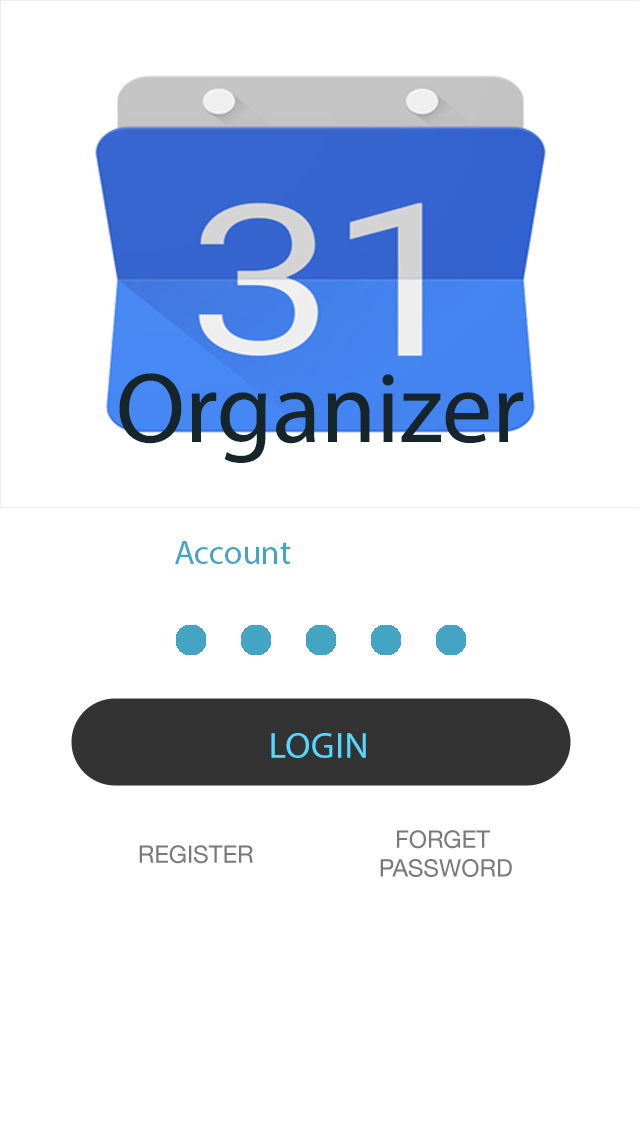
<style>
.page{position:relative;width:640px;height:1136px;background:#ffffff}
.page>*{position:absolute;margin:0}
.t1{font:100px "MyriadPro-Regular";color:#16252a}
.t2{font:34px "MyriadPro-Regular";color:#44a4c3}
.t3{font:36.4px "MyriadPro-Regular";color:#57d6ff;text-transform:uppercase}
.t4{font:24px "HelveticaNeue";color:#797979;text-transform:uppercase}
</style>
<div class="page">
<p class="t1" style="left:119px;top:373px;width:405px;height:90px">Organizer</p>
<p class="t2" style="left:175px;top:541px;width:116px;height:23px">Account</p>
<p class="t3" style="left:271px;top:733px;width:95px;height:25px">login</p>
<p class="t4" style="left:380px;top:830px;width:132px;height:47px;text-align:center">forget <br>password</p>
<p class="t4" style="left:139px;top:845px;width:114px;height:19px">Register</p>
</div>
